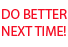
<style>
.page{position:relative;width:68px;height:47px;background:#ffffff}
.page>*{position:absolute;margin:0}
.t1{font:14px "MyriadPro-Regular";color:#f40e24}
</style>
<div class="page">
<p class="t1" style="left:2px;top:9px;width:65px;height:27px;text-align:center">DO BETTER<br>NEXT TIME!</p>
</div>
